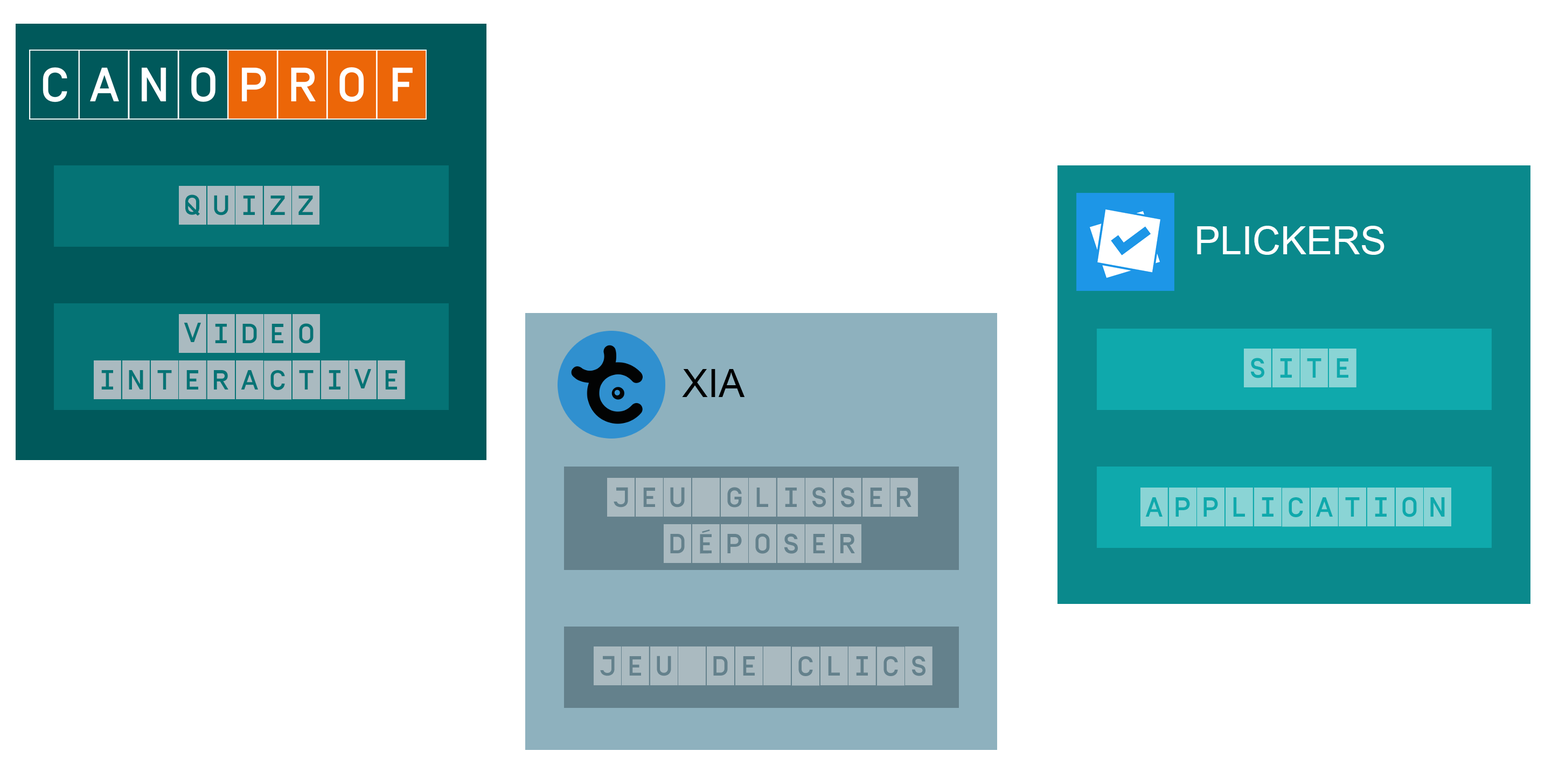
<style>
.page{position:relative;width:1559px;height:765px;background:#ffffff}
.page>*{position:absolute;margin:0}
.t1{font:38.8px "SimplonCNDP-Medium";color:#aabac0}
.t2{font:38.8px "ArialMT";color:#ffffff}
.t3{font:38.8px "SimplonCNDP-Medium";color:#8ad4d5}
.t4{font:38.8px "ArialMT";color:#000000}
</style>
<div class="page">
<p class="t1" style="left:179px;top:186px;width:140px;height:39px">quizz</p>
<p class="t2" style="left:1197px;top:226px;width:187px;height:29px">PLICKERS</p>
<p class="t1" style="left:94px;top:314px;width:311px;height:86px;text-align:center">video<br>interactive</p>
<p class="t3" style="left:1244px;top:349px;width:112px;height:38px">Site</p>
<p class="t4" style="left:682px;top:369px;width:63px;height:28px">XIA</p>
<p class="t1" style="left:607px;top:478px;width:311px;height:85px;text-align:center">Jeu glisser<br>déposer</p>
<p class="t3" style="left:1140px;top:487px;width:311px;height:40px">application</p>
<p class="t1" style="left:594px;top:646px;width:338px;height:40px">Jeu de clics</p>
</div>
